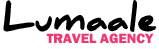
<style>
.page{position:relative;width:159px;height:49px;background:#ffffff}
.page>*{position:absolute;margin:0}
.t1{font:34px "DanielBlack";color:#010101}
.t2{font:14px "FranklinGothic-Heavy";color:#ef376e}
</style>
<div class="page">
<p class="t1" style="left:3px;top:0px;width:154px;height:32px">Lumaale</p>
<p class="t2" style="left:46px;top:33px;width:108px;height:11px">TRAVEL AGENCY</p>
</div>
